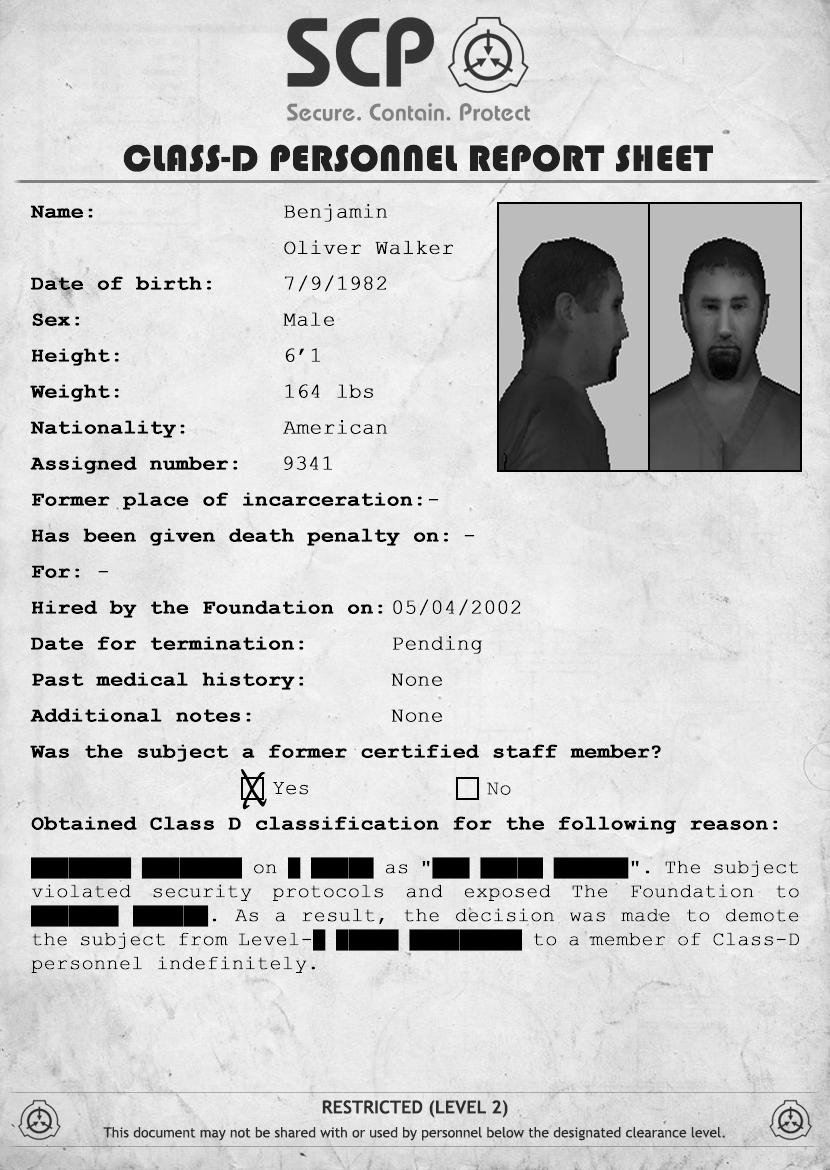
<style>
.page{position:relative;width:830px;height:1170px}
.page>*{position:absolute;margin:0}
.t1{font:38px "Bauhaus93";letter-spacing:-0.01em;color:#222121;font-weight:bold}
.t2{font:21px/36px "CourierNewPS-BoldMT";color:#000000;font-weight:bold}
.t3{font:21px/36px "CourierNewPSMT";color:#000000;font-weight:bold}
.t4{font:21px "CourierNewPSMT";color:#000000;font-weight:bold}
.t5{font:72px "InkFree";color:#000000}
.t6{font:21px "CourierNewPSMT";color:#000000}
.t7{font:20px/24px "CourierNewPSMT";color:#000000;font-weight:bold}
.t8{font:14px/24px "TrebuchetMS";color:#333333}
.t9{font:18px/24px "TrebuchetMS-Bold";color:#333333;text-transform:uppercase}
</style>
<div class="page">
<p class="t1" style="left:123px;top:144px;width:590px;height:28px">CLASS-D PERSONNEL REPORT SHEET</p>
<p class="t2" style="left:30px;top:204px;width:748px;height:630px;text-align:justify">Name:      <span class="t3">Benjamin<br>      <br></span>Date of birth:  <span class="t3">7/9/1982<br></span>Sex:      <span class="t3">Male<br></span>Height:     <span class="t3">6’1<br></span>Weight:<span class="t3">     164 lbs<br></span>Nationality:<span class="t3">   American<br></span>Assigned number:      <span class="t3">9341<br></span>Former place of incarceration:<span class="t3"> -<br></span>Has been given death penalty on:<span class="t3"> -<br></span>For:<span class="t3"> -<br></span>Hired by the Foundation on: <span class="t3">05/04/2002<br></span>Date for termination:   <span class="t3">Pending<br></span>Past medical history:   <span class="t3">None<br></span>Additional notes:    <span class="t3">None<br></span>Was the subject a former certified staff member?<br> <br>Obtained Class D classification for the following reason:</p>
<p class="t4" style="left:284px;top:240px;width:170px;height:15px">Oliver Walker</p>
<p class="t5" style="left:241px;top:768px;width:26px;height:42px">x</p>
<p class="t6" style="left:273px;top:782px;width:36px;height:13px">Yes</p>
<p class="t6" style="left:487px;top:782px;width:24px;height:13px">No</p>
<p class="t7" style="left:31px;top:857px;width:768px;height:116px;text-align:justify">████████ ████████ on █ █████ as "███ █████ ██████". The subject violated security protocols and exposed The Foundation to ███████ ██████. As a result, the decision was made to demote the subject from Level-█ █████ █████████ to a member of Class-D personnel indefinitely.</p>
<p class="t8" style="left:103px;top:1100px;width:622px;height:41px;text-align:center"><span class="t9">Restricted (level 2)<br></span>This document may not be shared with or used by personnel below the designated clearance level.</p>
</div>
